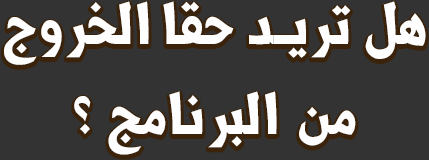
<style>
.page{position:relative;width:429px;height:160px;background:#333333}
.page>*{position:absolute;margin:0}
.t1{font:71px/90px "Shorooq_N1";letter-spacing:0.03em;color:#fefefe}
</style>
<div class="page">
<p class="t1" style="left:4px;top:1px;width:422px;height:154px;text-align:center">هل تريد حقا الخروج<br>من البرنامج ؟</p>
</div>
